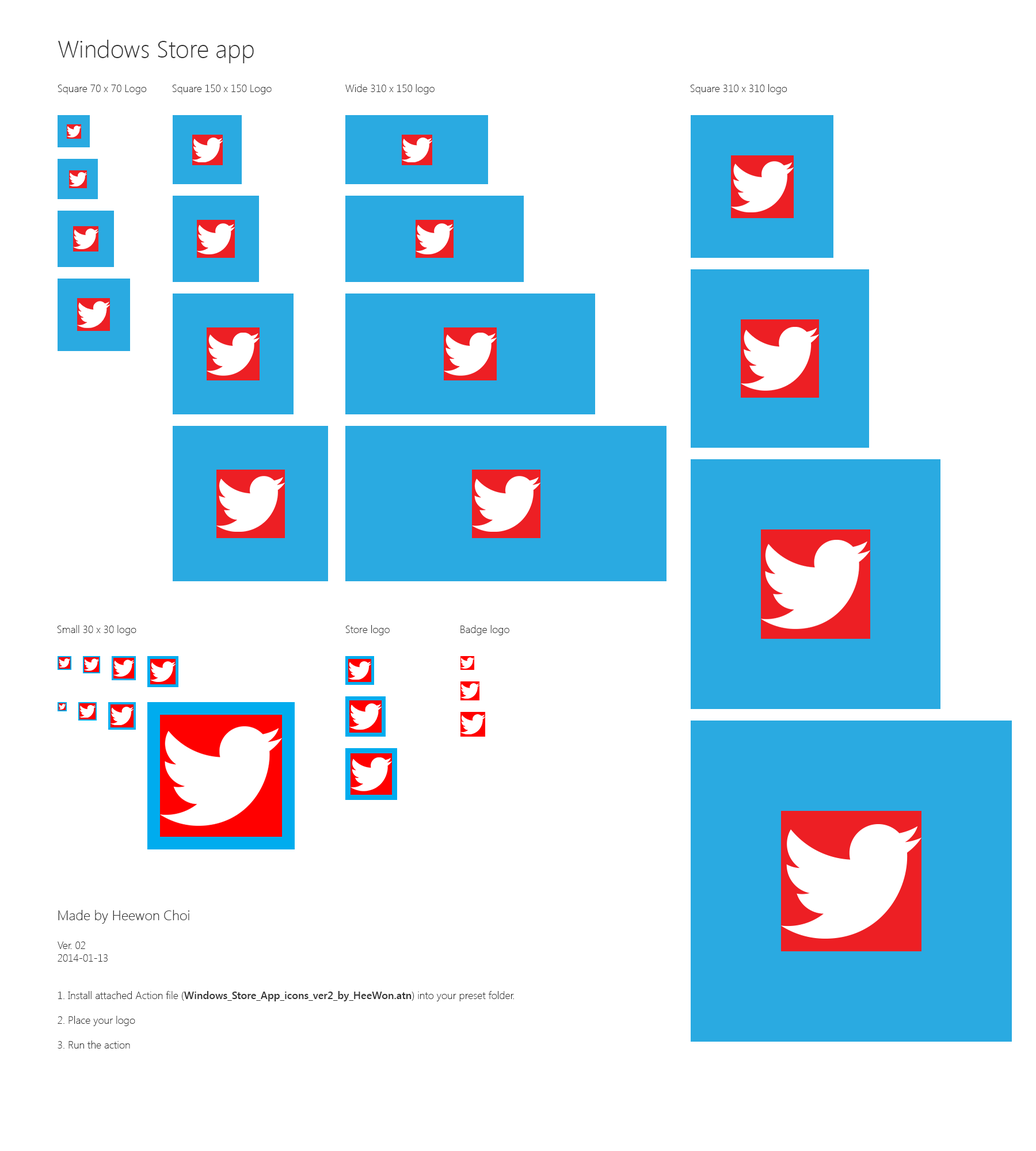
<style>
.page{position:relative;width:1036px;height:1151px;background:#ffffff}
.page>*{position:absolute;margin:0}
.t1{font:24.2px "SegoeUI-Light";color:#333333}
.t2{font:10.4px "SegoeUI-Light";color:#333333}
.t3{font:13.8px "SegoeUI-Light";color:#333333}
.t4{font:10.4px "SegoeUI-SemiBold";color:#333333}
</style>
<div class="page">
<p class="t1" style="left:58px;top:40px;width:196px;height:23px">Windows Store app</p>
<p class="t2" style="left:58px;top:85px;width:89px;height:9px">Square 70 x 70 Logo</p>
<p class="t2" style="left:172px;top:85px;width:100px;height:9px">Square 150 x 150 Logo</p>
<p class="t2" style="left:345px;top:84px;width:90px;height:10px">Wide 310 x 150 logo</p>
<p class="t2" style="left:690px;top:84px;width:97px;height:10px">Square 310 x 310 logo</p>
<p class="t2" style="left:57px;top:625px;width:79px;height:10px">Small 30 x 30 logo</p>
<p class="t2" style="left:345px;top:625px;width:45px;height:10px">Store logo</p>
<p class="t2" style="left:460px;top:625px;width:49px;height:10px">Badge logo</p>
<p class="t2" style="left:58px;top:910px;width:456px;height:139px"><span class="t3">Made by Heewon Choi<br><br></span>Ver. 02<br>2014-01-13<br><br><br>1. Install attached Action file (<span class="t4">Windows_Store_App_icons_ver2_by_HeeWon.atn</span>) into your preset folder.<br><br>2. Place your logo<br><br>3. Run the action</p>
</div>
